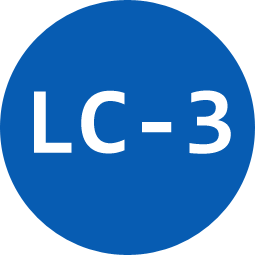
<style>
.page{position:relative;width:256px;height:256px;background:#075cb2}
.page>*{position:absolute;margin:0}
.t1{font:96px "Consolas-Bold";color:#ffffff}
</style>
<div class="page">
<p class="t1" style="left:34px;top:90px;width:197px;height:64px">LC-3</p>
</div>
